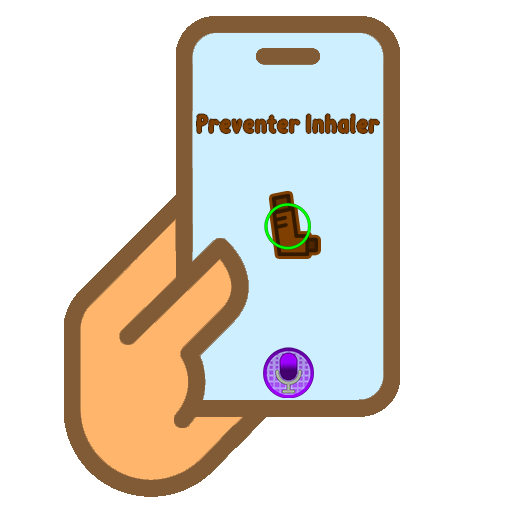
<style>
.page{position:relative;width:512px;height:512px;background:#ffffff}
.page>*{position:absolute;margin:0}
.t1{font:26.7px "BubbleBobble";color:#7e3f00}
</style>
<div class="page">
<p class="t1" style="left:197px;top:114px;width:182px;height:19px">Preventer Inhaler</p>
</div>
